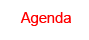
<style>
.page{position:relative;width:89px;height:40px;background:#ffffff}
.page>*{position:absolute;margin:0}
.t1{font:14.7px "ArialMT";color:#ff0000}
</style>
<div class="page">
<p class="t1" style="left:20px;top:12px;width:51px;height:14px">Agenda</p>
</div>
